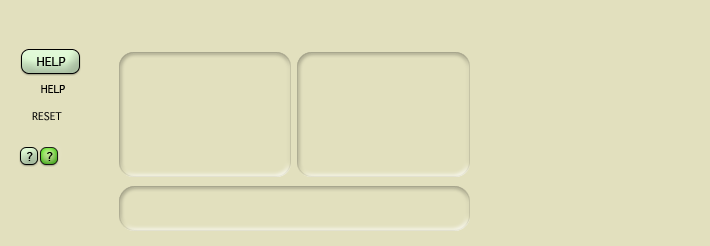
<style>
.page{position:relative;width:710px;height:246px;background:#e2e0be}
.page>*{position:absolute;margin:0}
.t1{font:12px "Geneva";color:#000000}
.t2{font:10px "Geneva";color:#000000}
</style>
<div class="page">
<p class="t1" style="left:37px;top:57px;width:29px;height:9px">HELP</p>
<p class="t2" style="left:41px;top:85px;width:24px;height:8px">HELP</p>
<p class="t2" style="left:32px;top:112px;width:30px;height:9px">RESET</p>
<p class="t1" style="left:27px;top:152px;width:6px;height:9px">?</p>
<p class="t1" style="left:47px;top:152px;width:6px;height:9px">?</p>
</div>
